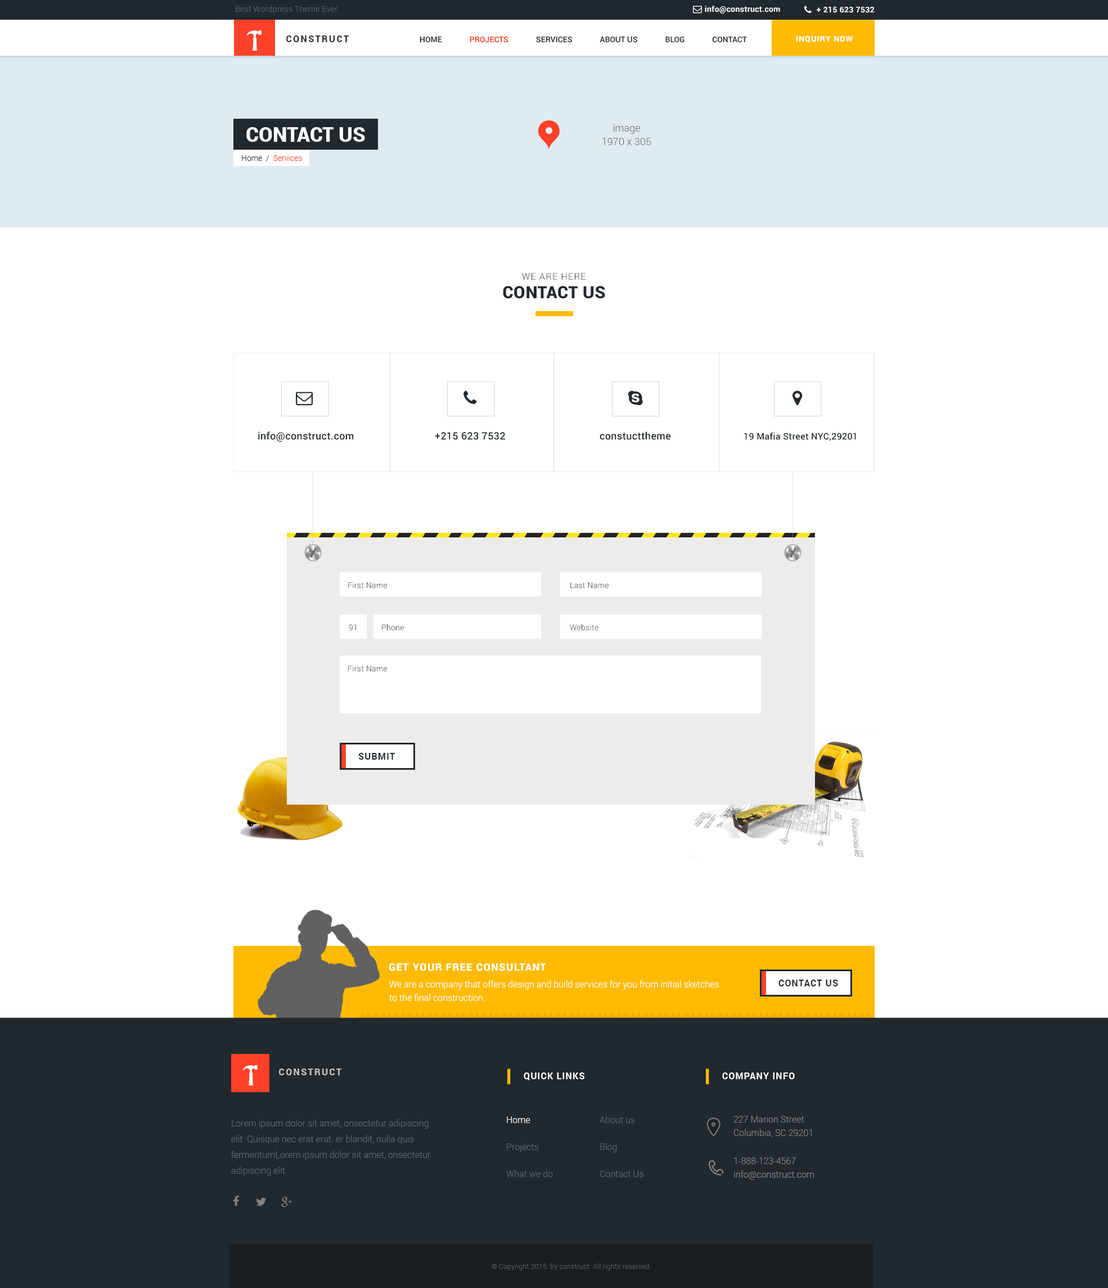
<style>
.page{position:relative;width:1108px;height:1288px;background:#ffffff}
.page>*{position:absolute;margin:0}
.t1{font:7.9px "Roboto-Light";letter-spacing:0.025em;color:#5a5f63}
.t2{font:7.9px "Roboto-Bold";letter-spacing:0.025em;color:#ffffff}
.t3{font:9px "Roboto-Black";letter-spacing:0.15em;color:#353537;text-transform:uppercase}
.t4{font:7.9px "Roboto-Bold";color:#353537}
.t5{font:7.9px "Roboto-Bold";color:#ff4229}
.t6{font:7.9px "Roboto-Bold";letter-spacing:0.075em;color:#ffffff;text-transform:uppercase}
.t7{font:10.1px/13.5px "Roboto-Light";color:#767d81}
.t8{font:20.2px "Roboto-Black";color:#ffffff;text-transform:uppercase}
.t9{font:7.9px "Roboto-Light";color:#ff4229}
.t10{font:7.9px "Roboto-Light";color:#21282e}
.t11{font:9px "Roboto-Light";letter-spacing:0.075em;color:#21282e;text-transform:uppercase}
.t12{font:16.9px "Roboto-Black";letter-spacing:0.02em;color:#21282e;text-transform:uppercase}
.t13{font:10.1px "Roboto-Medium";letter-spacing:0.02em;color:#21282e}
.t14{font:9px "Roboto-Medium";letter-spacing:0.02em;color:#21282e}
.t15{font:7.9px "Roboto-Light";letter-spacing:0.02em}
.t16{font:7.9px "Roboto-Light";letter-spacing:0.02em;color:#21282e}
.t17{font:9px "Roboto-Bold";letter-spacing:0.075em;color:#21282e;text-transform:uppercase}
.t18{font:10.1px "Roboto-Black";letter-spacing:0.075em;color:#ffffff;text-transform:uppercase}
.t19{font:9px/13.5px "Roboto-Light";color:#ffffff}
.t20{font:9px "Roboto-Black";letter-spacing:0.15em;color:#c0bfbe;text-transform:uppercase}
.t21{font:9px "Roboto-Bold";letter-spacing:0.075em;color:#ffffff;text-transform:uppercase}
.t22{font:9px/15.8px "Roboto-Light";color:#5e656a}
.t23{font:9px/27px "Roboto-Light";color:#5e656a}
.t24{font:9px/27px "Roboto-Light";color:#ffffff}
.t25{font:9px/13.5px "Roboto-Light";color:#828282}
.t26{font:6.8px "Roboto-Light";letter-spacing:0.025em;color:#52595e}
</style>
<div class="page">
<p class="t1" style="left:236px;top:6px;width:102px;height:8px">Best Wordpress Theme Ever</p>
<p class="t2" style="left:705px;top:6px;width:75px;height:8px">info@construct.com</p>
<p class="t2" style="left:817px;top:7px;width:58px;height:6px">+ 215 623 7532</p>
<p class="t3" style="left:286px;top:35px;width:63px;height:7px">Construct</p>
<p class="t4" style="left:420px;top:37px;width:327px;height:6px">HOME              <span class="t5">PROJECTS</span>              SERVICES              ABOUT US              BLOG              CONTACT</p>
<p class="t6" style="left:796px;top:36px;width:57px;height:7px">Inquiry Now</p>
<p class="t7" style="left:602px;top:124px;width:49px;height:21px;text-align:center">image<br>1970 x 305</p>
<p class="t8" style="left:246px;top:127px;width:119px;height:15px">Contact US</p>
<p class="t9" style="left:242px;top:155px;width:60px;height:6px"><span class="t10">Home  /  </span>Services</p>
<p class="t11" style="left:522px;top:273px;width:64px;height:7px">we are here</p>
<p class="t12" style="left:503px;top:286px;width:102px;height:13px">Contact US</p>
<p class="t13" style="left:258px;top:431px;width:96px;height:11px">info@construct.com</p>
<p class="t13" style="left:435px;top:432px;width:70px;height:8px">+215 623 7532</p>
<p class="t13" style="left:600px;top:431px;width:71px;height:9px">constucttheme</p>
<p class="t14" style="left:744px;top:432px;width:112px;height:9px">19 Mafia Street NYC,29201</p>
<p class="t15" style="left:348px;top:582px;width:40px;height:6px">First Name</p>
<p class="t16" style="left:570px;top:582px;width:39px;height:6px">Last Name</p>
<p class="t15" style="left:349px;top:624px;width:7px;height:7px">91</p>
<p class="t16" style="left:382px;top:624px;width:22px;height:7px">Phone</p>
<p class="t16" style="left:570px;top:624px;width:28px;height:7px">Website</p>
<p class="t15" style="left:348px;top:665px;width:40px;height:7px">First Name</p>
<p class="t17" style="left:358px;top:753px;width:37px;height:6px">Submit</p>
<p class="t18" style="left:389px;top:963px;width:157px;height:8px">Get Your Free Consultant</p>
<p class="t19" style="left:389px;top:980px;width:330px;height:21px">We are a company that offers design and build services for you from initial sketches <br>to the final construction.</p>
<p class="t17" style="left:778px;top:979px;width:60px;height:7px">Contact US</p>
<p class="t20" style="left:279px;top:1068px;width:62px;height:7px">Construct</p>
<p class="t21" style="left:524px;top:1072px;width:60px;height:8px">Quick Links</p>
<p class="t21" style="left:722px;top:1072px;width:73px;height:7px">Company Info</p>
<p class="t22" style="left:231px;top:1119px;width:200px;height:57px">Lorem ipsum dolor sit amet, onsectetur adipiscing elit. Quisque nec erat erat. er blandit, nulla quis fermentumLorem ipsum dolor sit amet, onsectetur adipiscing elit.</p>
<p class="t23" style="left:506px;top:1116px;width:47px;height:61px"><span class="t24">Home<br></span>Projects<br>What we do</p>
<p class="t23" style="left:600px;top:1115px;width:44px;height:62px">About us<br>Blog<br>Contact Us</p>
<p class="t25" style="left:734px;top:1115px;width:78px;height:22px">227 Marion Street<br>Columbia, SC 29201</p>
<p class="t25" style="left:734px;top:1157px;width:80px;height:23px">1-888-123-4567<br>info@construct.com</p>
<p class="t26" style="left:492px;top:1263px;width:159px;height:7px">© Copyright 2015. by construct. All rights reserved.</p>
</div>
